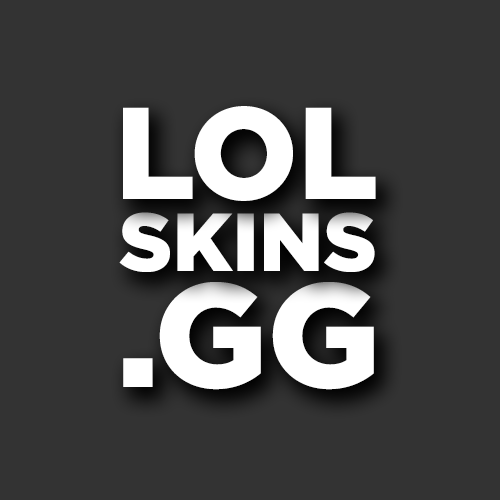
<style>
.page{position:relative;width:500px;height:500px;background:#333333}
.page>*{position:absolute;margin:0}
.t1{font:130px "Gotham-Black";color:#ffffff}
.t2{font:82px "Gotham-Black";color:#ffffff}
.t3{font:147px "Gotham-Black";color:#ffffff}
</style>
<div class="page">
<p class="t1" style="left:123px;top:106px;width:253px;height:95px">LOL</p>
<p class="t2" style="left:119px;top:212px;width:256px;height:60px">SKINS</p>
<p class="t3" style="left:123px;top:282px;width:251px;height:108px">.GG</p>
</div>
